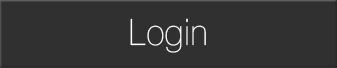
<style>
.page{position:relative;width:337px;height:68px;background:#303030}
.page>*{position:absolute;margin:0}
.t1{font:36.2px "Lane-Narrow";color:#ffffff;scale:0.95 1}
</style>
<div class="page">
<p class="t1" style="left:130px;top:18px;width:76px;height:35px">Login</p>
</div>
